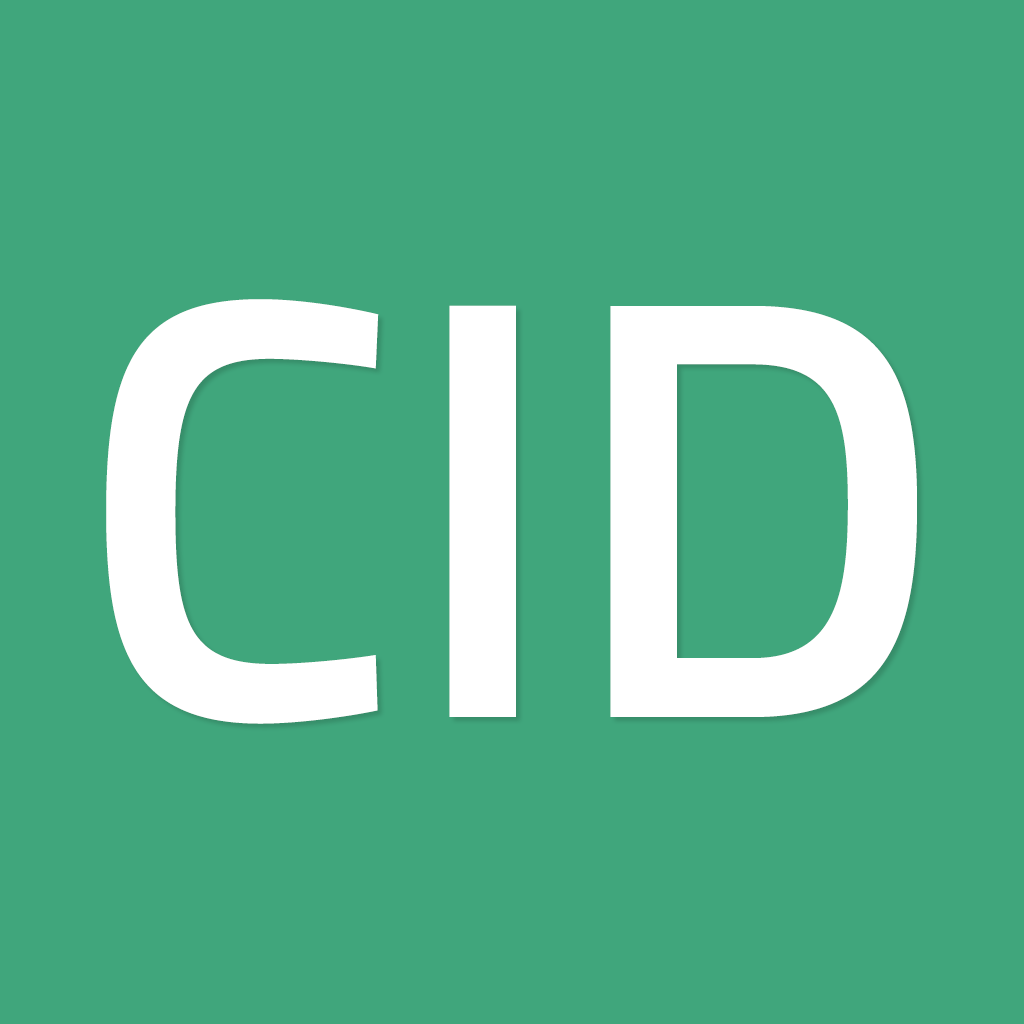
<style>
.page{position:relative;width:1024px;height:1024px;background:#40a67c}
.page>*{position:absolute;margin:0}
.t1{font:600px "Titillium-Semibold";color:#ffffff}
</style>
<div class="page">
<p class="t1" style="left:106px;top:299px;width:811px;height:425px">CID</p>
</div>
